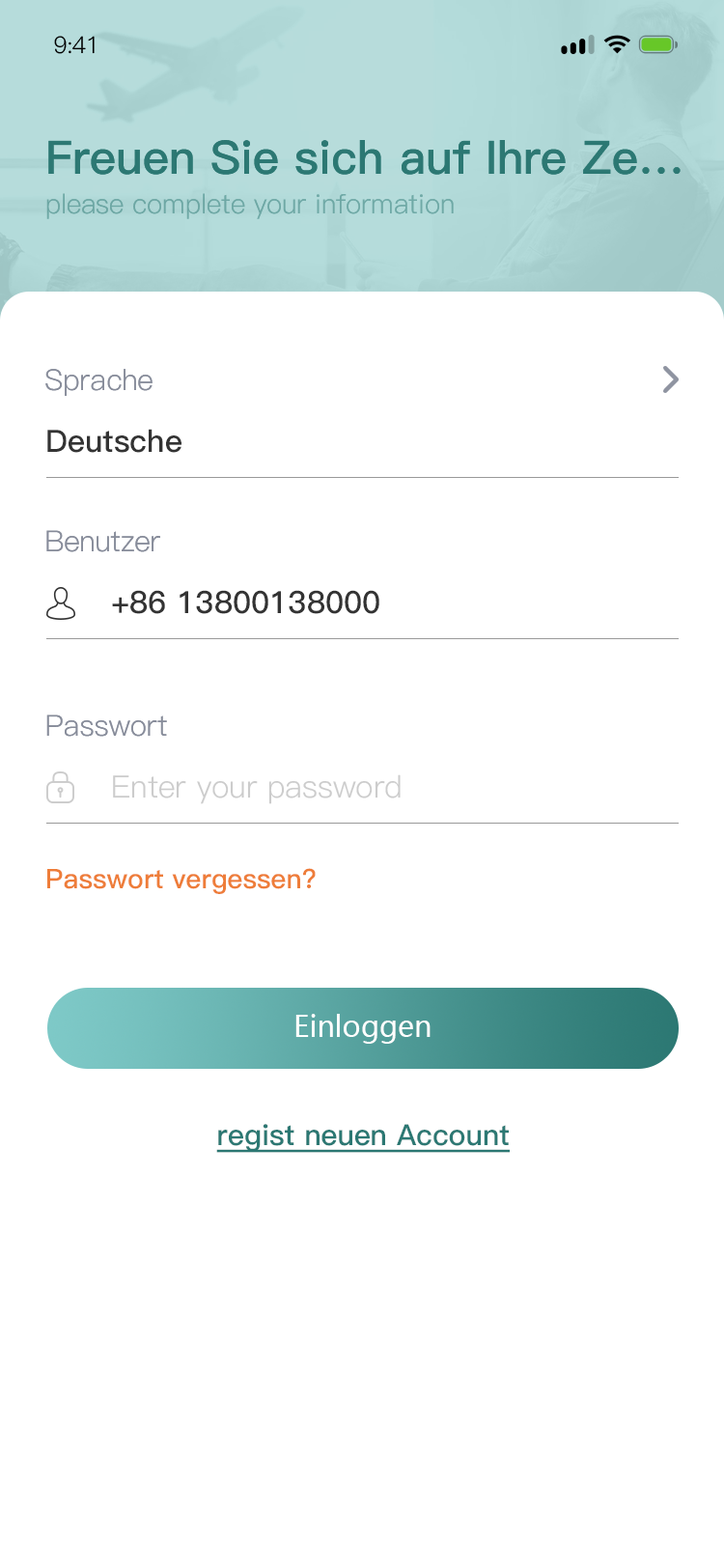
<style>
.page{position:relative;width:724px;height:1568px;background:#ffffff}
.page>*{position:absolute;margin:0}
.t1{font:23.2px "PingFang-SC-Regular";letter-spacing:-0.025em;color:#000000}
.t2{font:46.3px "PingFang-SC-Bold";color:#2c7873}
.t3{font:27px "PingFang-SC-Regular";color:#6da7a4}
.t4{font:29px "PingFang-SC-Regular";color:#878c9a}
.t5{font:29px "PingFang-SC-Regular";color:#878c9a;text-transform:uppercase}
.t6{font:30.9px "PingFang-SC-Bold";color:#333333}
.t7{font:30.9px "PingFang-SC-Regular";color:#cccccc}
.t8{font:27px "PingFang-SC-Bold";color:#ee7d39}
.t9{font:29px "MicrosoftYaHei";color:#ffffff}
.t10{font:29px "PingFang-SC-Bold";color:#2c7873;text-decoration:underline}
</style>
<div class="page">
<p class="t1" style="left:54px;top:36px;width:41px;height:18px">9:41</p>
<p class="t2" style="left:48px;top:140px;width:633px;height:35px">Freuen Sie sich auf Ihre Ze…</p>
<p class="t3" style="left:46px;top:193px;width:408px;height:26px">please complete your information</p>
<p class="t4" style="left:45px;top:369px;width:108px;height:27px"><span class="t5">S</span>prache</p>
<p class="t6" style="left:47px;top:429px;width:135px;height:24px">Deutsche</p>
<p class="t4" style="left:46px;top:530px;width:114px;height:22px">Benutzer</p>
<p class="t6" style="left:112px;top:590px;width:267px;height:24px">+86 13800138000</p>
<p class="t4" style="left:46px;top:714px;width:121px;height:23px">Passwort</p>
<p class="t7" style="left:113px;top:774px;width:288px;height:30px">Enter your password</p>
<p class="t8" style="left:47px;top:868px;width:269px;height:26px">Passwort vergessen?</p>
<p class="t9" style="left:295px;top:1014px;width:136px;height:30px">Einloggen</p>
<p class="t10" style="left:216px;top:1124px;width:294px;height:29px">regist neuen Account</p>
</div>
